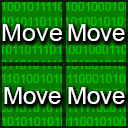
<style>
.page{position:relative;width:128px;height:128px;background:#077c00}
.page>*{position:absolute;margin:0}
.t1{font:24px "ArialMT";color:#ffffff;scale:1.06 1}
.t2{font:24px "ArialMT";color:#ffffff}
</style>
<div class="page">
<p class="t1" style="left:2px;top:24px;width:60px;height:17px">Move</p>
<p class="t2" style="left:68px;top:24px;width:57px;height:17px">Move</p>
<p class="t2" style="left:4px;top:87px;width:57px;height:17px">Move</p>
<p class="t2" style="left:68px;top:87px;width:57px;height:17px">Move</p>
</div>
